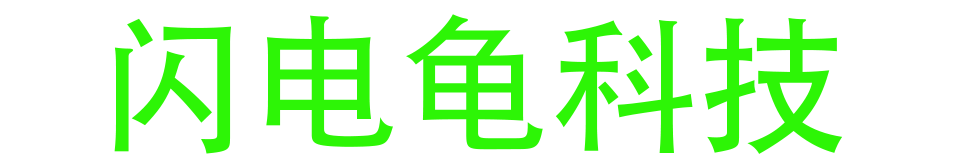
<style>
.page{position:relative;width:957px;height:167px;background:#ffffff}
.page>*{position:absolute;margin:0}
.t1{font:150px "AdobeHeitiStd-Regular";color:#2df506}
</style>
<div class="page">
<p class="t1" style="left:114px;top:14px;width:729px;height:140px">闪电龟科技</p>
</div>
